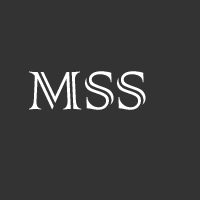
<style>
.page{position:relative;width:200px;height:200px;background:#333333}
.page>*{position:absolute;margin:0}
.t1{font:72px "ColonnaMT";color:#ffffff}
</style>
<div class="page">
<p class="t1" style="left:29px;top:71px;width:117px;height:39px">MSS</p>
</div>
